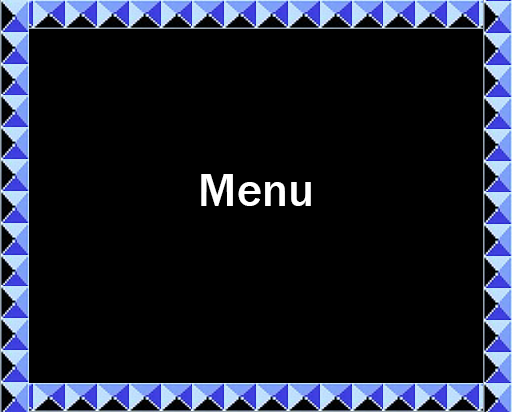
<style>
.page{position:relative;width:512px;height:412px;background:#000000}
.page>*{position:absolute;margin:0}
.t1{font:48px "FranklinGothic-Medium";color:#ffffff}
</style>
<div class="page">
<p class="t1" style="left:201px;top:174px;width:110px;height:32px">Menu</p>
</div>
